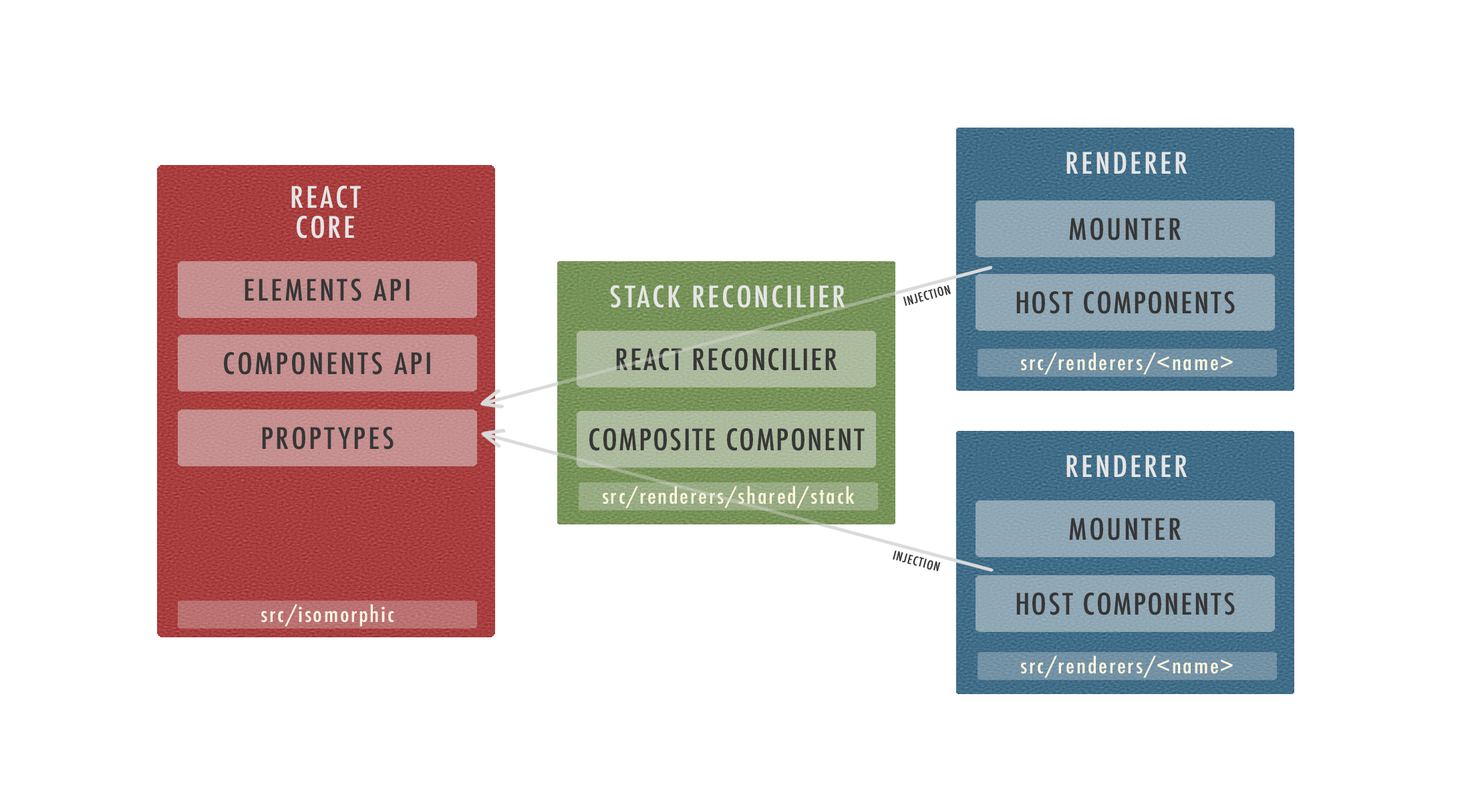
<style>
.page{position:relative;width:1474px;height:809px;background:#ffffff}
.page>*{position:absolute;margin:0}
.t1{font:28.9px "Futura-CondensedMedium";letter-spacing:0.075em;color:#e5e5e5;scale:1.11 1}
.t2{font:28.9px/30.1px "Futura-CondensedMedium";letter-spacing:0.075em;color:#e5e5e5;scale:1.11 1}
.t3{font:28.9px "Futura-CondensedMedium";letter-spacing:0.075em;color:#363636;scale:1.11 1}
.t4{font:12px "Futura-CondensedMedium";letter-spacing:0.05em;color:#363636;scale:1.11 1}
.t5{font:28.9px "Futura-CondensedMedium";letter-spacing:0.05em;color:#363636;scale:1.11 1}
.t6{font:21px "Futura-CondensedMedium";letter-spacing:0.075em;color:#fff7e0;scale:1.11 1}
</style>
<div class="page">
<p class="t1" style="left:1066px;top:152px;width:121px;height:22px">RENDERER</p>
<p class="t2" style="left:291px;top:186px;width:70px;height:53px;text-align:center">REACT<br>CORE</p>
<p class="t3" style="left:1069px;top:218px;width:112px;height:23px">MOUNTER</p>
<p class="t3" style="left:245px;top:279px;width:165px;height:22px">ELEMENTS API</p>
<p class="t1" style="left:610px;top:285px;width:235px;height:23px">STACK RECONCILIER</p>
<p class="t4" style="left:903px;top:285px;width:48px;height:21px;rotate:-15deg">INJECTION</p>
<p class="t5" style="left:1016px;top:291px;width:219px;height:23px">HOST COMPONENTS</p>
<p class="t3" style="left:224px;top:352px;width:206px;height:23px">COMPONENTS API</p>
<p class="t5" style="left:616px;top:348px;width:221px;height:23px">REACT RECONCILIER</p>
<p class="t6" style="left:1021px;top:352px;width:212px;height:23px">src/renderers/&lt;name&gt;</p>
<p class="t3" style="left:262px;top:427px;width:132px;height:23px">PROPTYPES</p>
<p class="t5" style="left:589px;top:428px;width:276px;height:23px">COMPOSITE COMPONENT</p>
<p class="t1" style="left:1066px;top:455px;width:121px;height:22px">RENDERER</p>
<p class="t6" style="left:603px;top:486px;width:252px;height:22px">src/renderers/shared/stack</p>
<p class="t3" style="left:1069px;top:518px;width:112px;height:22px">MOUNTER</p>
<p class="t4" style="left:893px;top:551px;width:48px;height:20px;rotate:15deg">INJECTION</p>
<p class="t5" style="left:1016px;top:593px;width:219px;height:22px">HOST COMPONENTS</p>
<p class="t6" style="left:261px;top:604px;width:133px;height:23px">src/isomorphic</p>
<p class="t6" style="left:1021px;top:655px;width:212px;height:23px">src/renderers/&lt;name&gt;</p>
</div>
